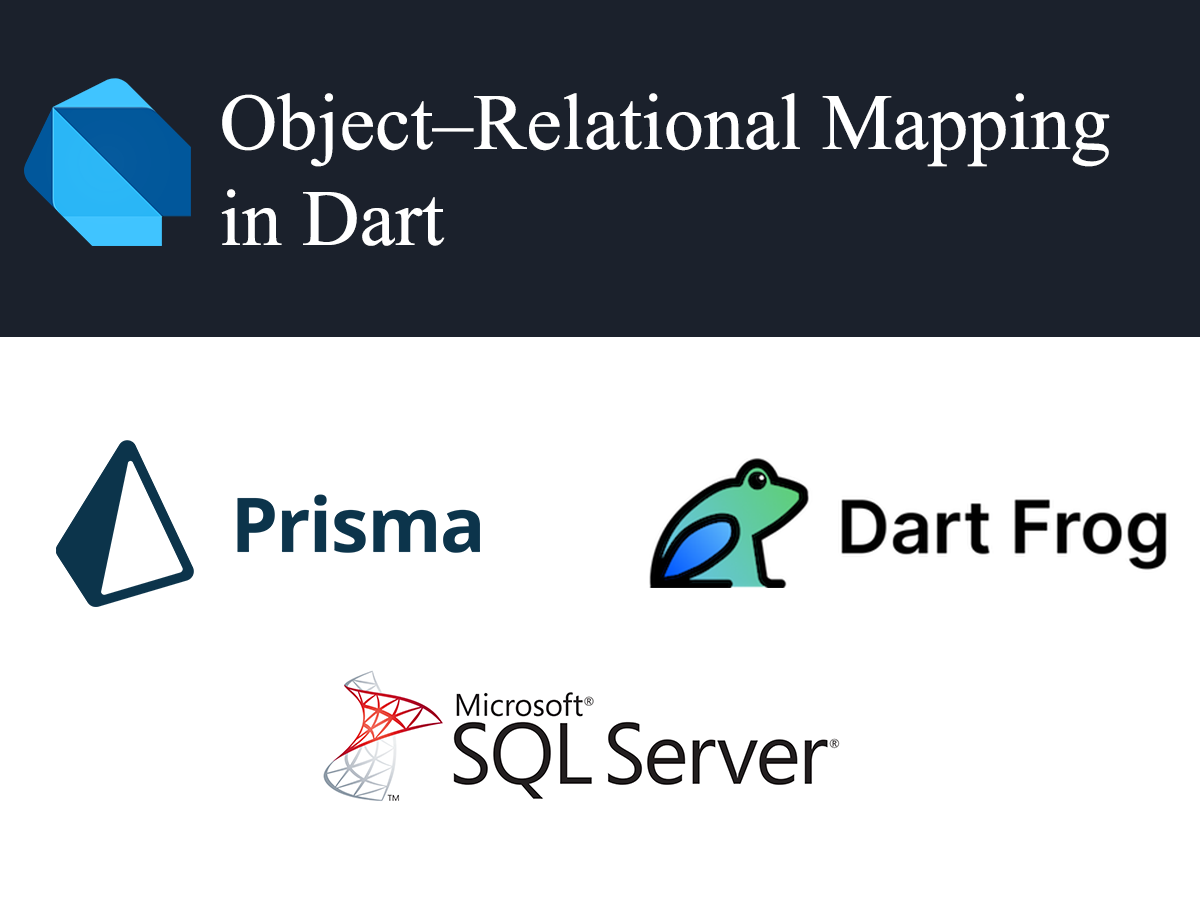
<style>
.page{position:relative;width:1200px;height:900px;background:#ffffff}
.page>*{position:absolute;margin:0}
.t1{font:80px "MongolianBaiti";color:#ffffff}
</style>
<div class="page">
<p class="t1" style="left:221px;top:93px;width:889px;height:153px">Object–Relational Mapping<br>in Dart</p>
</div>
